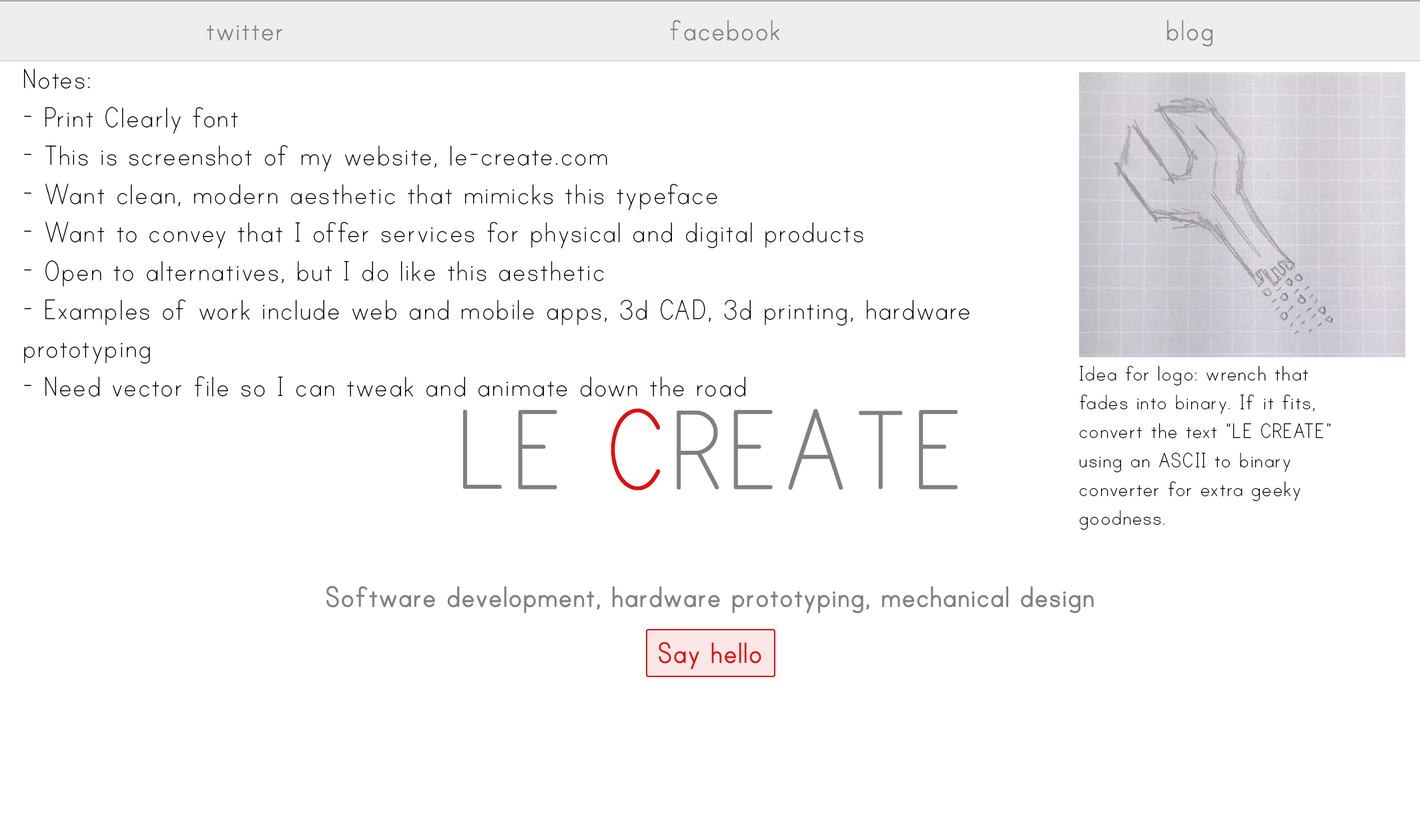
<style>
.page{position:relative;width:1420px;height:840px;background:#ffffff}
.page>*{position:absolute;margin:0}
.t1{font:32px "PrintClearly";color:#000000}
.t2{font:24px "PrintClearly";color:#000000}
</style>
<div class="page">
<p class="t1" style="left:24px;top:69px;width:946px;height:327px">Notes:<br>- Print Clearly font<br>- This is screenshot of my website, le-create.com<br>- Want clean, modern aesthetic that mimicks this typeface<br>- Want to convey that I offer services for physical and digital products<br>- Open to alternatives, but I do like this aesthetic<br>- Examples of work include web and mobile apps, 3d CAD, 3d printing, hardware<br>prototyping<br>- Need vector file so I can tweak and animate down the road</p>
<p class="t2" style="left:1080px;top:366px;width:251px;height:164px">Idea for logo: wrench that<br>fades into binary. If it fits,<br>convert the text “LE CREATE”<br>using an ASCII to binary<br>converter for extra geeky<br>goodness.</p>
</div>
